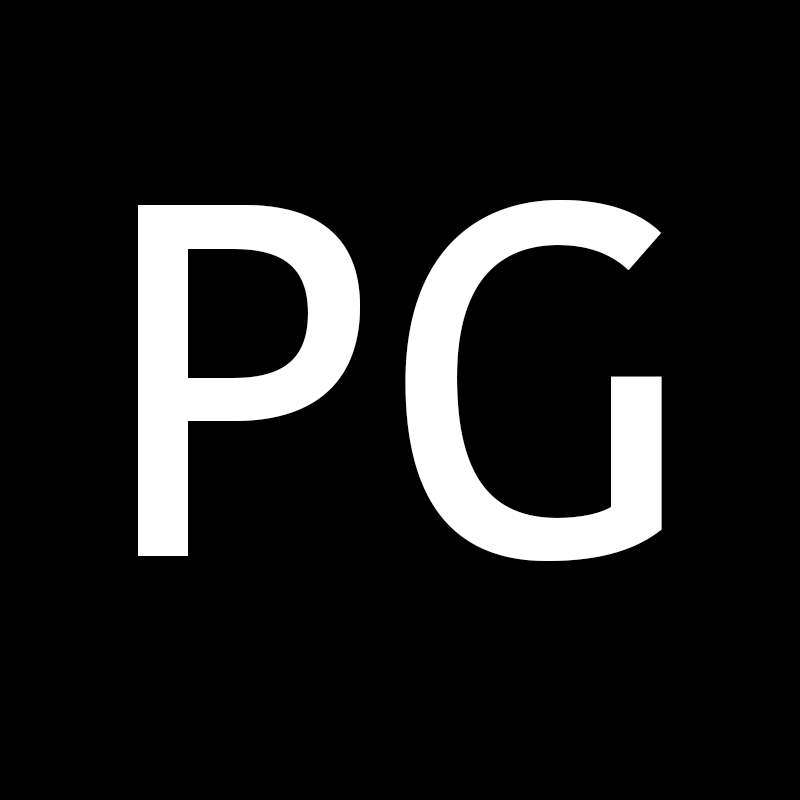
<style>
.page{position:relative;width:800px;height:800px;background:#000000}
.page>*{position:absolute;margin:0}
.t1{font:500px "KohinoorBangla-Medium";color:#ffffff}
</style>
<div class="page">
<p class="t1" style="left:138px;top:200px;width:524px;height:361px">PG</p>
</div>
